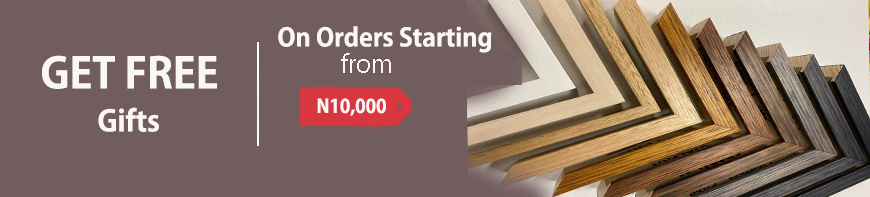
<style>
.page{position:relative;width:870px;height:197px;background:#715d5e}
.page>*{position:absolute;margin:0}
.t1{font:25px "KozGoPr6N-Bold";color:#fbf7f7}
.t2{font:25px "KozGoPr6N-Regular";color:#fbf7f7}
.t3{font:42px "KozGoPr6N-Bold";color:#fbf7f7}
.t4{font:18.7px "KozGoPr6N-Bold";color:#fbf7f7}
.t5{font:29px "KozGoPr6N-Bold";color:#fbf7f7}
</style>
<div class="page">
<p class="t1" style="left:278px;top:26px;width:214px;height:27px">On Orders Starting</p>
<p class="t2" style="left:341px;top:53px;width:50px;height:20px">from</p>
<p class="t3" style="left:42px;top:55px;width:175px;height:34px">GET FREE</p>
<p class="t4" style="left:317px;top:98px;width:69px;height:18px">N10,000</p>
<p class="t5" style="left:98px;top:107px;width:61px;height:25px">Gifts</p>
</div>
